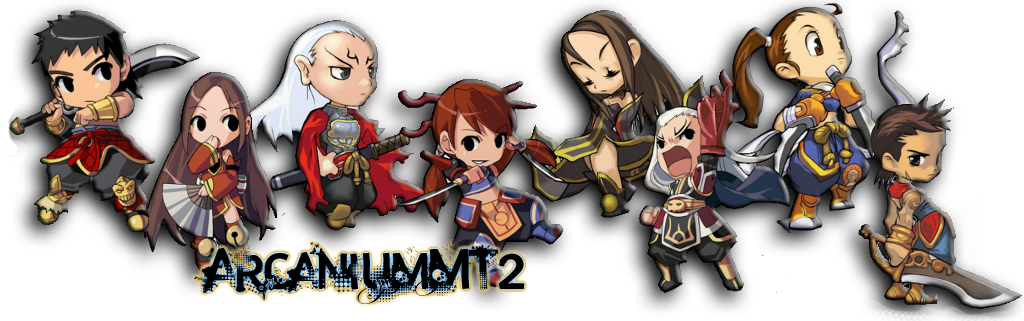
<style>
.page{position:relative;width:1024px;height:321px;background:#ffffff}
.page>*{position:absolute;margin:0}
.t1{font:60px "trashco";letter-spacing:-0.04em;color:#000000}
</style>
<div class="page">
<p class="t1" style="left:194px;top:241px;width:331px;height:63px">ArcaniumMT2</p>
</div>
